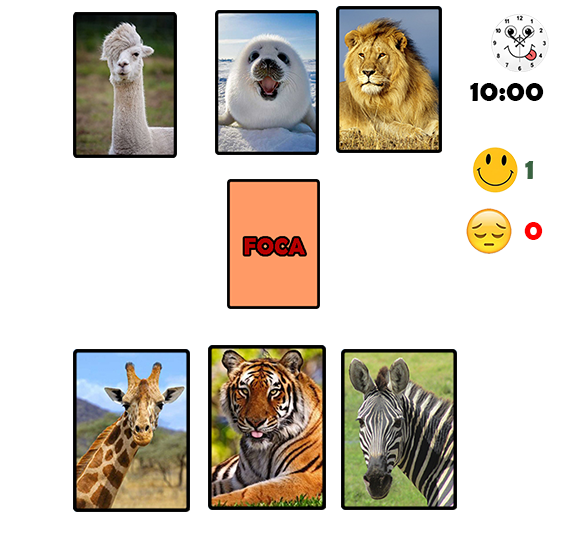
<style>
.page{position:relative;width:566px;height:558px;background:#ffffff}
.page>*{position:absolute;margin:0}
.t1{font:30px "BerlinSansFBDemi-Bold";color:#000000}
.t2{font:30px "BerlinSansFBDemi-Bold";color:#396341}
.t3{font:30px "BerlinSansFBDemi-Bold";color:#ff0000}
</style>
<div class="page">
<p class="t1" style="left:470px;top:83px;width:74px;height:18px">10:00</p>
<p class="t2" style="left:525px;top:161px;width:9px;height:18px">1</p>
<p class="t3" style="left:524px;top:222px;width:19px;height:18px">0</p>
</div>
